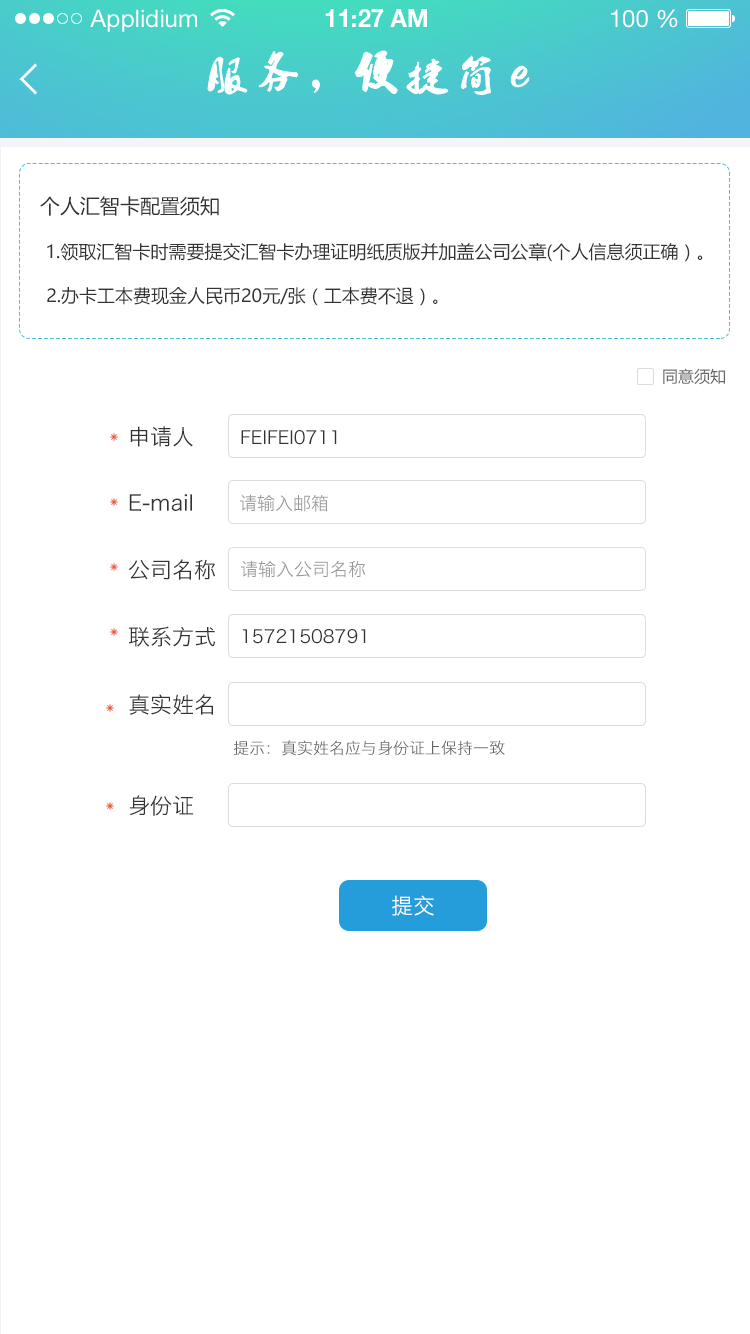
<style>
.page{position:relative;width:750px;height:1334px;background:#ffffff}
.page>*{position:absolute;margin:0}
.t1{font:24px "HelveticaNeueLTStd-Roman";color:#ffffff}
.t2{font:24px "HelveticaNeueLTStd-Bd";color:#ffffff}
.t3{font:20px "MicrosoftYaHei";color:#333333;text-transform:uppercase}
.t4{font:18px "MicrosoftYaHei";color:#333333;text-transform:uppercase}
.t5{font:16px "MicrosoftYaHei";color:#666666;text-transform:uppercase}
.t6{font:22px "HiraginoSansGB-W3";color:#333333;text-transform:uppercase}
.t7{font:18px "HiraginoSansGB-W3";color:#333333;text-transform:uppercase}
.t8{font:22px "HiraginoSansGB-W3";color:#333333}
.t9{font:18px "HiraginoSansGB-W3";color:#999999;text-transform:uppercase}
.t10{font:16px "HiraginoSansGB-W3";color:#666666;text-transform:uppercase}
.t11{font:22px "HiraginoSansGB-W3";color:#ffffff;text-transform:uppercase}
</style>
<div class="page">
<p class="t1" style="left:90px;top:9px;width:107px;height:23px">Applidium</p>
<p class="t2" style="left:325px;top:9px;width:102px;height:18px">11:27 AM</p>
<p class="t1" style="left:611px;top:9px;width:67px;height:19px">100 %</p>
<p class="t3" style="left:40px;top:196px;width:179px;height:20px">个人汇智卡配置须知</p>
<p class="t4" style="left:47px;top:242px;width:656px;height:20px">1.领取汇智卡时需要提交汇智卡办理证明纸质版并加盖公司公章(个人信息须正确）。</p>
<p class="t4" style="left:47px;top:287px;width:391px;height:19px">2.办卡工本费现金人民币20元/张（工本费不退）。</p>
<p class="t5" style="left:663px;top:368px;width:62px;height:17px">同意须知</p>
<p class="t6" style="left:130px;top:426px;width:63px;height:21px">申请人</p>
<p class="t7" style="left:241px;top:430px;width:96px;height:15px">feifei0711</p>
<p class="t8" style="left:129px;top:494px;width:63px;height:17px"><span class="t6">e-</span>mail</p>
<p class="t9" style="left:240px;top:494px;width:88px;height:18px">请输入邮箱</p>
<p class="t6" style="left:128px;top:559px;width:87px;height:21px">公司名称</p>
<p class="t9" style="left:241px;top:560px;width:124px;height:18px">请输入公司名称</p>
<p class="t6" style="left:129px;top:626px;width:87px;height:21px">联系方式</p>
<p class="t7" style="left:243px;top:629px;width:123px;height:15px">15721508791</p>
<p class="t6" style="left:129px;top:694px;width:85px;height:21px">真实姓名</p>
<p class="t10" style="left:233px;top:740px;width:272px;height:16px">提示：真实姓名应与身份证上保持一致</p>
<p class="t6" style="left:129px;top:795px;width:65px;height:21px">身份证</p>
<p class="t11" style="left:392px;top:895px;width:42px;height:21px">提交</p>
</div>
